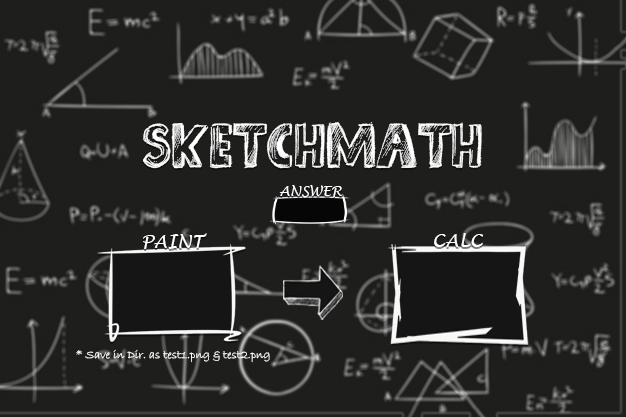
<style>
.page{position:relative;width:626px;height:417px;background:#1e1e1c}
.page>*{position:absolute;margin:0}
.t1{font:63.4px "Sketch-Book";color:#ffffff}
.t2{font:14px "LucidaHandwriting-Italic";color:#ffffff}
.t3{font:18px "LucidaHandwriting-Italic";color:#ffffff}
.t4{font:12px "BradleyHandITC";color:#ffffff}
</style>
<div class="page">
<p class="t1" style="left:143px;top:122px;width:339px;height:47px">SKETCHMATH</p>
<p class="t2" style="left:279px;top:185px;width:64px;height:12px">ANSWER</p>
<p class="t3" style="left:143px;top:233px;width:64px;height:16px">PAINT</p>
<p class="t3" style="left:434px;top:233px;width:49px;height:14px">CALC</p>
<p class="t4" style="left:76px;top:349px;width:194px;height:14px">* Save in Dir. as test1.png &amp; test2.png</p>
</div>
